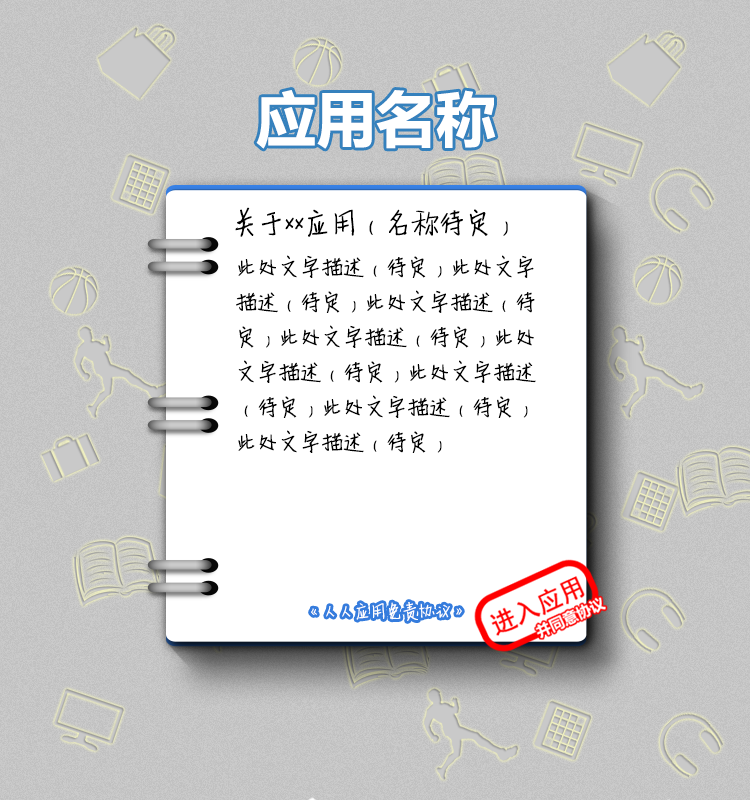
<style>
.page{position:relative;width:750px;height:800px;background:#ffffff}
.page>*{position:absolute;margin:0}
.t1{font:60px "MicrosoftYaHei-Bold";color:#ffffff}
.t2{font:25px "SentyMARUKO-Elementary";color:#000000}
.t3{font:20px "SentyMARUKO-Elementary";color:#000000}
.t4{font:15px "SentyMARUKO-Elementary";color:#ffffff}
</style>
<div class="page">
<p class="t1" style="left:256px;top:90px;width:240px;height:59px">应用名称</p>
<p class="t2" style="left:235px;top:207px;width:273px;height:30px">关于xx应用（名称待定）</p>
<p class="t3" style="left:236px;top:255px;width:300px;height:198px">此处文字描述（待定）此处文字描述（待定）此处文字描述（待定）此处文字描述（待定）此处文字描述（待定）此处文字描述（待定）此处文字描述（待定）此处文字描述（待定）</p>
<p class="t4" style="left:311px;top:602px;width:151px;height:19px">《人人应用免责协议》</p>
</div>
